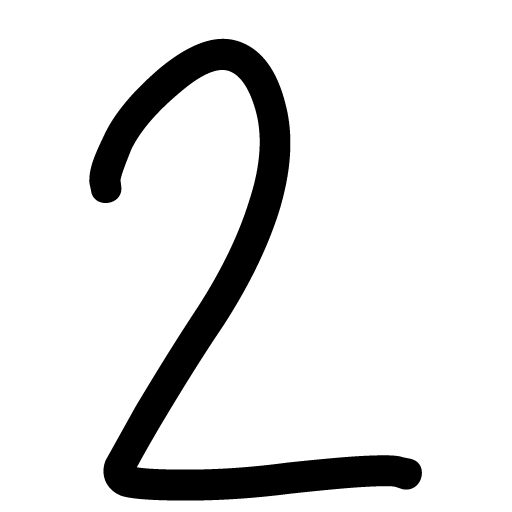
<style>
.page{position:relative;width:512px;height:512px;background:#ffffff}
.page>*{position:absolute;margin:0}
.t1{font:770px "RiseStarHand";color:#000000}
</style>
<div class="page">
<p class="t1" style="left:89px;top:38px;width:333px;height:463px">2</p>
</div>
